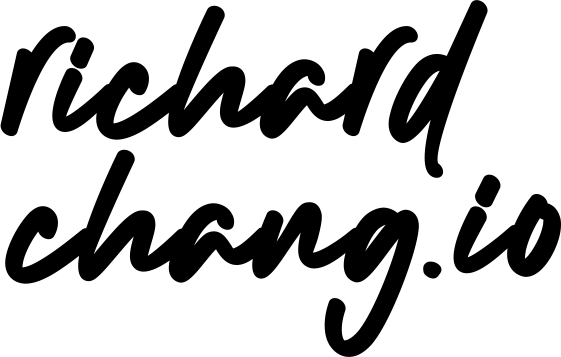
<style>
.page{position:relative;width:561px;height:357px;background:#ffffff}
.page>*{position:absolute;margin:0}
.t1{font:132.4px "Outlandersignature";color:#000000;font-weight:bold}
.t2{font:139.6px "Outlandersignature";color:#000000;font-weight:bold}
.t3{font:139.6px "BrushSignature";letter-spacing:0.06em;color:#000000;font-weight:bold}
</style>
<div class="page">
<p class="t1" style="left:0px;top:0px;width:488px;height:178px">richard</p>
<p class="t1" style="left:5px;top:149px;width:414px;height:208px">chang</p>
<p class="t2" style="left:423px;top:174px;width:138px;height:105px;rotate:3deg"><span class="t3">.</span>io</p>
</div>
